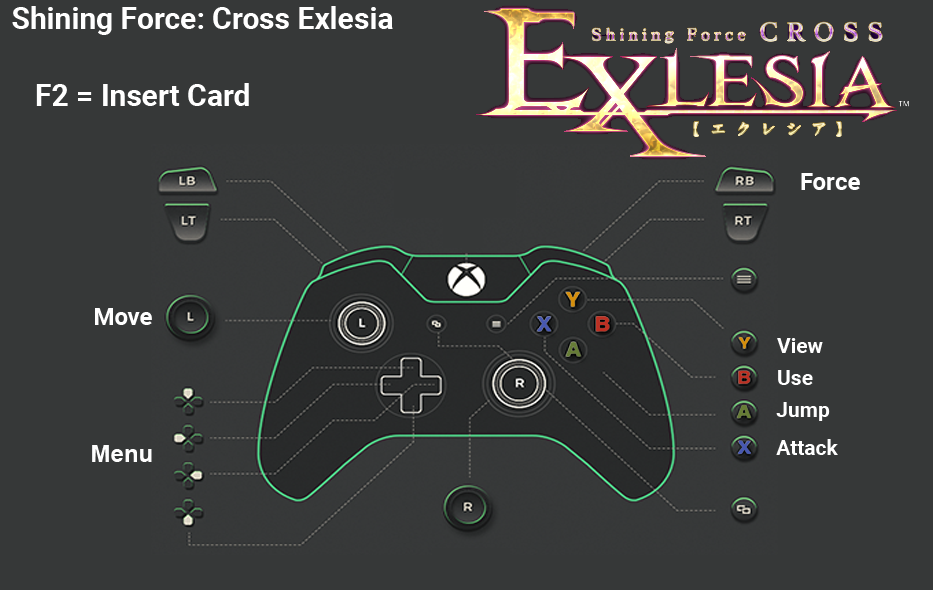
<style>
.page{position:relative;width:933px;height:590px;background:#363838}
.page>*{position:absolute;margin:0}
.t1{font:30px "Roboto-Bold";color:#ffffff}
.t2{font:24px "Roboto-Bold";color:#ffffff}
.t3{font:21px "Roboto-Bold";color:#ffffff}
.t4{font:24px "Arial-BoldMT";color:#fefefe}
</style>
<div class="page">
<p class="t1" style="left:12px;top:6px;width:381px;height:29px">Shining Force: Cross Exlesia</p>
<p class="t1" style="left:36px;top:83px;width:213px;height:23px">F2 = Insert Card</p>
<p class="t2" style="left:801px;top:173px;width:59px;height:17px">Force</p>
<p class="t2" style="left:95px;top:308px;width:57px;height:17px">Move</p>
<p class="t3" style="left:777px;top:338px;width:46px;height:15px">View</p>
<p class="t3" style="left:778px;top:370px;width:35px;height:15px">Use</p>
<p class="t3" style="left:776px;top:402px;width:54px;height:19px">Jump</p>
<p class="t4" style="left:92px;top:445px;width:60px;height:17px">Menu</p>
<p class="t3" style="left:776px;top:439px;width:62px;height:16px">Attack</p>
</div>
